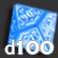
<style>
.page{position:relative;width:58px;height:58px;background:#333333}
.page>*{position:absolute;margin:0}
.t1{font:20px "Corbel";color:#ffffff}
.t2{font:20px "CopperplateGothic-Bold";color:#ffffff}
</style>
<div class="page">
<p class="t1" style="left:5px;top:40px;width:9px;height:14px">d</p>
<p class="t2" style="left:17px;top:41px;width:37px;height:13px">100</p>
</div>
